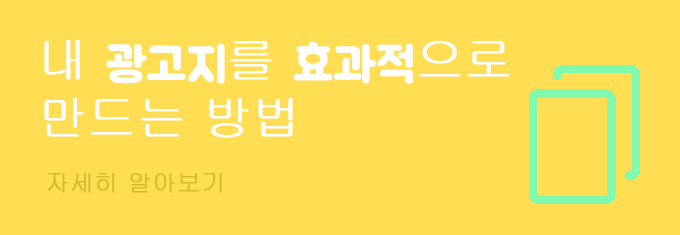
<style>
.page{position:relative;width:680px;height:235px;background:#ffde53}
.page>*{position:absolute;margin:0}
.t1{font:48px "Gulim";color:#ffffff;font-weight:bold}
.t2{font:48px "BMJUA";color:#ffffff;font-weight:bold}
.t3{font:24px "Gulim";color:#d3be31;font-weight:bold}
</style>
<div class="page">
<p class="t1" style="left:44px;top:40px;width:465px;height:98px">내 <span class="t2">광고지</span>를 <span class="t2">효과적</span>으로<br>만드는 방법</p>
<p class="t3" style="left:47px;top:173px;width:175px;height:20px">자세히 알아보기</p>
</div>
